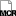
<style>
.page{position:relative;width:16px;height:16px;background:#ffffff}
.page>*{position:absolute;margin:0}
.t1{font:8px "Arial-Black";letter-spacing:-0.15em;color:#000000}
</style>
<div class="page">
<p class="t1" style="left:0px;top:10px;width:18px;height:7px">MCR</p>
</div>
